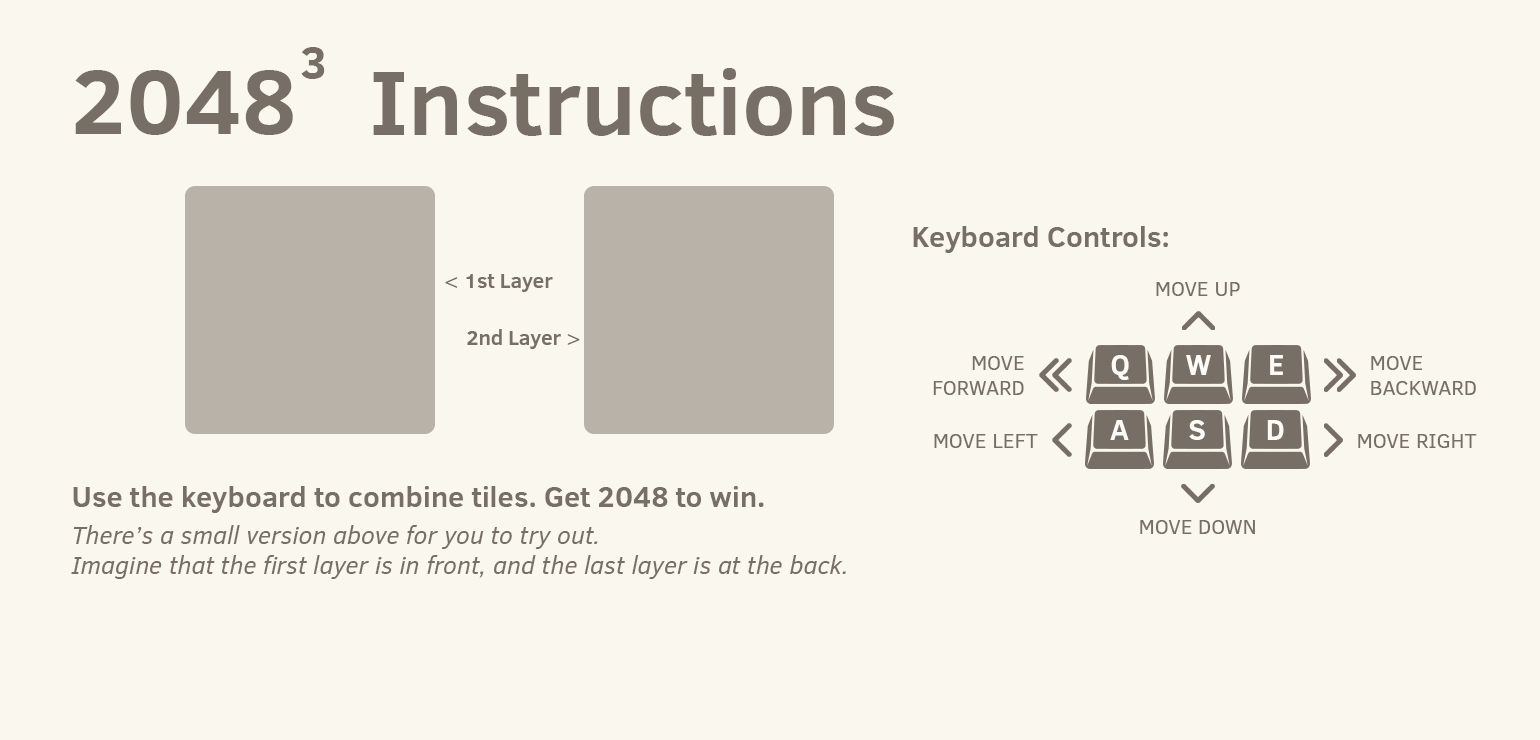
<style>
.page{position:relative;width:1540px;height:740px;background:#faf7ee}
.page>*{position:absolute;margin:0}
.t1{font:47.5px "ClearSans-Bold";color:#776e65}
.t2{font:92.8px "ClearSans-Bold";color:#776e65}
.t3{font:29.2px "ClearSans-Bold";color:#776e65}
.t4{font:20.8px "ClearSans-Bold";color:#776e65}
.t5{font:20.8px "ClearSans";color:#776e65}
.t6{font:29.2px "ClearSans-Bold";color:#fdfbf7}
.t7{font:25px "ClearSans-Italic";color:#776e65}
</style>
<div class="page">
<p class="t1" style="left:301px;top:47px;width:24px;height:32px">3</p>
<p class="t2" style="left:75px;top:70px;width:218px;height:65px">2048</p>
<p class="t2" style="left:373px;top:68px;width:521px;height:68px">Instructions</p>
<p class="t3" style="left:913px;top:226px;width:255px;height:27px">Keyboard Controls:</p>
<p class="t4" style="left:445px;top:274px;width:108px;height:18px"><span class="t5">&lt; </span>1st Layer</p>
<p class="t5" style="left:1156px;top:282px;width:84px;height:14px">MOVE UP</p>
<p class="t4" style="left:467px;top:329px;width:113px;height:20px">2nd Layer <span class="t5">&gt;</span></p>
<p class="t5" style="left:933px;top:356px;width:91px;height:39px;text-align:right">MOVE<br>FORWARD</p>
<p class="t6" style="left:1111px;top:355px;width:18px;height:25px">Q</p>
<p class="t6" style="left:1186px;top:355px;width:25px;height:20px">W</p>
<p class="t6" style="left:1270px;top:355px;width:13px;height:20px">E</p>
<p class="t5" style="left:1371px;top:356px;width:105px;height:39px">MOVE<br>BACKWARD</p>
<p class="t6" style="left:1110px;top:420px;width:19px;height:20px">A</p>
<p class="t6" style="left:1189px;top:420px;width:16px;height:20px">S</p>
<p class="t6" style="left:1267px;top:420px;width:17px;height:20px">D</p>
<p class="t5" style="left:934px;top:434px;width:104px;height:14px">MOVE LEFT</p>
<p class="t5" style="left:1358px;top:434px;width:119px;height:14px">MOVE RIGHT</p>
<p class="t3" style="left:73px;top:486px;width:691px;height:27px">Use the keyboard to combine tiles. Get 2048 to win.</p>
<p class="t5" style="left:1140px;top:520px;width:115px;height:14px">MOVE DOWN</p>
<p class="t7" style="left:71px;top:525px;width:775px;height:54px">There’s a small version above for you to try out. <br>Imagine that the first layer is in front, and the last layer is at the back.</p>
</div>
